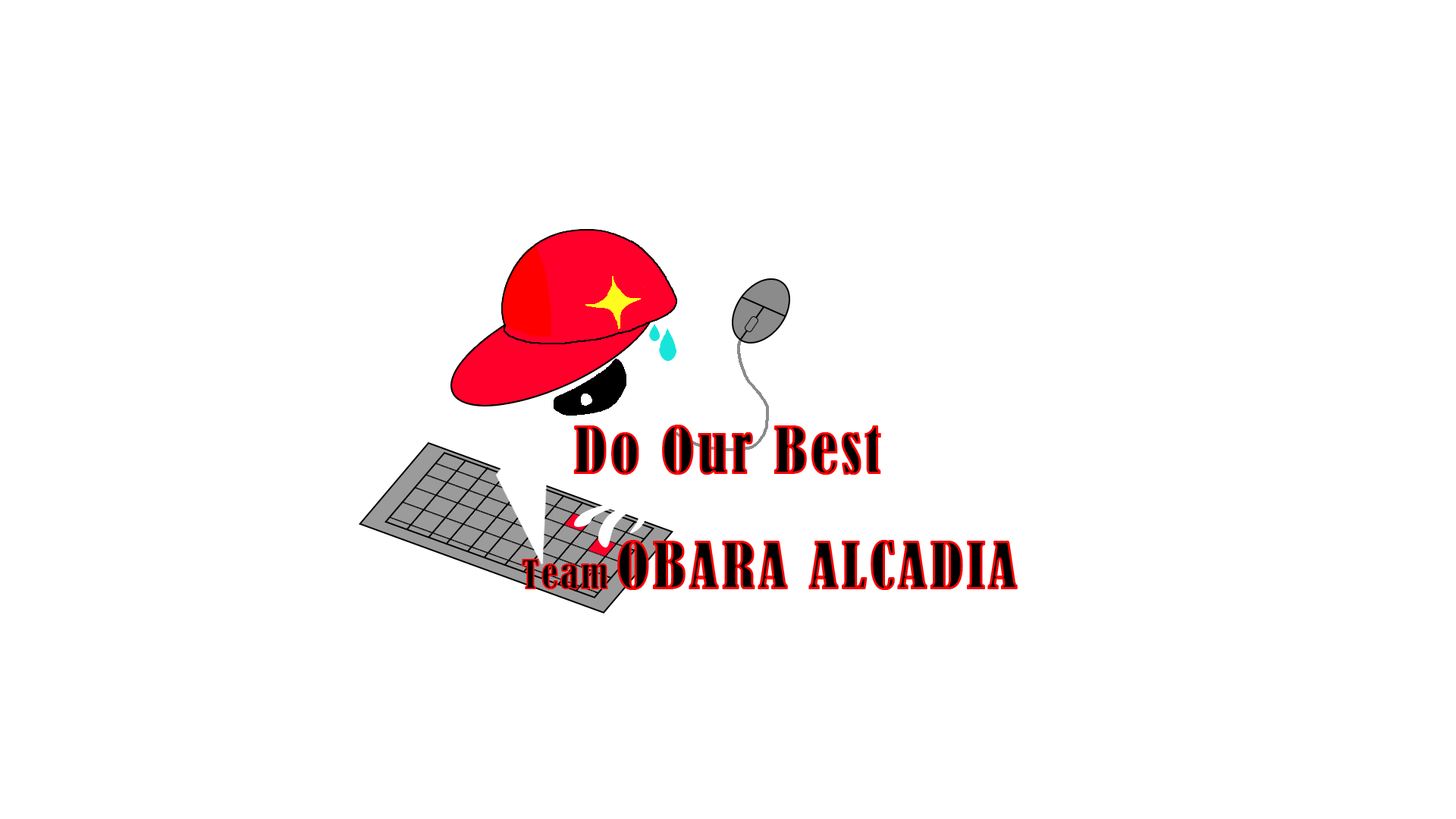
<style>
.page{position:relative;width:1456px;height:819px;background:#ffffff}
.page>*{position:absolute;margin:0}
.t1{font:60.7px "BernardMT-Condensed";letter-spacing:0.03em;font-weight:bold}
.t2{font:37.9px "BernardMT-Condensed";letter-spacing:0.03em;font-weight:bold}
</style>
<div class="page">
<p class="t1" style="left:573px;top:425px;width:308px;height:50px">Do Our Best</p>
<p class="t1" style="left:617px;top:540px;width:401px;height:50px">OBARA ALCADIA</p>
<p class="t2" style="left:521px;top:559px;width:87px;height:30px">Team</p>
</div>
